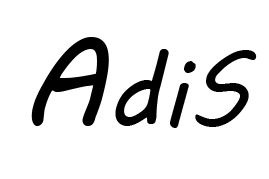
<style>
.page{position:relative;width:269px;height:179px;background:#ffffff}
.page>*{position:absolute;margin:0}
.t1{font:100px "MVBoli";color:#000000}
.t2{font:125px "MVBoli";color:#000000}
</style>
<div class="page">
<p class="t1" style="left:31px;top:37px;width:226px;height:91px"><span class="t2">A</span>diS</p>
</div>
